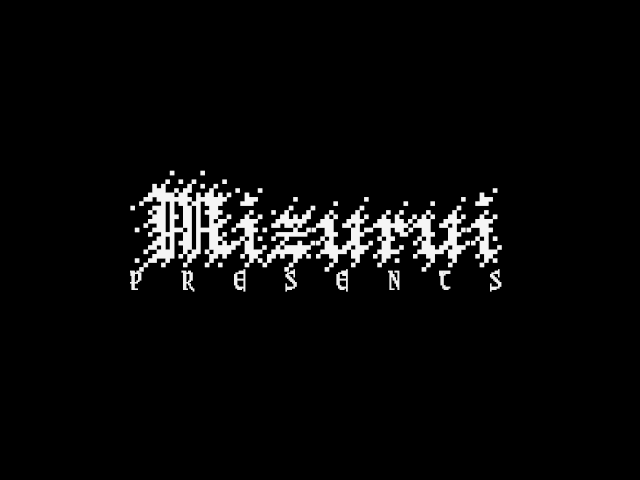
<style>
.page{position:relative;width:640px;height:480px;background:#000000}
.page>*{position:absolute;margin:0}
.t1{font:140px "Wrath-of-Mordor";letter-spacing:0.004em;color:#f5f5f5}
.t2{font:24px "Sangoku4";letter-spacing:1.6em;color:#f0f0f0}
</style>
<div class="page">
<p class="t1" style="left:130px;top:170px;width:372px;height:106px">Mizurui</p>
<p class="t2" style="left:130px;top:269px;width:372px;height:23px">PRESENTS</p>
</div>
